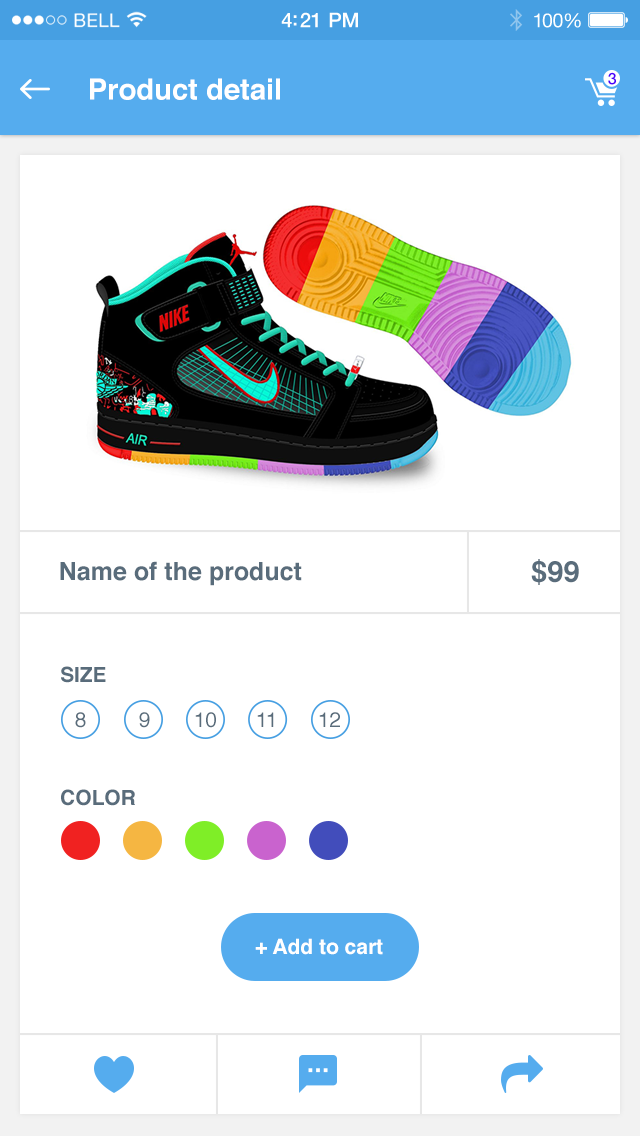
<style>
.page{position:relative;width:640px;height:1136px;background:#ffffff}
.page>*{position:absolute;margin:0}
.t1{font:20.4px "HelveticaNeue-Medium";letter-spacing:-0.02em;color:#ffffff}
.t2{font:19.6px "HelveticaNeue";letter-spacing:-0.02em;color:#ffffff}
.t3{font:29.2px "Helvetica-Bold";color:#ffffff}
.t4{font:16px "HelveticaNeue-Medium";color:#4c00fa}
.t5{font:25px "Helvetica-Bold";color:#596c7b}
.t6{font:29.2px "Helvetica-Bold";color:#596c7b}
.t7{font:20.8px "Helvetica-Bold";color:#596c7b;text-transform:uppercase}
.t8{font:21px "Helvetica";color:#596c7b;text-transform:uppercase}
.t9{font:21px "Helvetica-Bold";color:#ffffff}
.t10{font:21px "Helvetica-Bold";color:#ffffff;text-transform:uppercase}
</style>
<div class="page">
<p class="t1" style="left:281px;top:12px;width:77px;height:16px">4:21 PM</p>
<p class="t2" style="left:534px;top:13px;width:47px;height:15px">100%</p>
<p class="t3" style="left:90px;top:78px;width:190px;height:22px">Product detail</p>
<p class="t4" style="left:608px;top:72px;width:9px;height:13px">3</p>
<p class="t5" style="left:60px;top:561px;width:242px;height:25px">Name of the product</p>
<p class="t6" style="left:531px;top:559px;width:48px;height:26px">$99</p>
<p class="t7" style="left:61px;top:666px;width:45px;height:17px">SIZE</p>
<p class="t8" style="left:75px;top:712px;width:11px;height:16px">8</p>
<p class="t8" style="left:139px;top:712px;width:11px;height:16px">9</p>
<p class="t8" style="left:195px;top:712px;width:21px;height:16px">10</p>
<p class="t8" style="left:257px;top:712px;width:17px;height:15px">11</p>
<p class="t8" style="left:319px;top:712px;width:21px;height:15px">12</p>
<p class="t7" style="left:61px;top:789px;width:74px;height:17px">color</p>
<p class="t9" style="left:255px;top:938px;width:128px;height:17px"><span class="t10">+ a</span>dd to cart</p>
</div>
